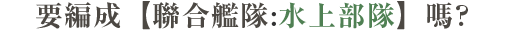
<style>
.page{position:relative;width:505px;height:31px;background:#ffffff}
.page>*{position:absolute;margin:0}
.t1{font:28px "RyuminPr6N-ExBold";letter-spacing:0.05em;color:#4c4843}
.t2{font:28px "RyuminPr6N-ExBold";letter-spacing:0.05em;color:#323232}
.t3{font:28px "RyuminPr6N-ExBold";letter-spacing:0.05em;color:#4f8053}
</style>
<div class="page">
<p class="t1" style="left:36px;top:1px;width:432px;height:29px">要編成【聯合艦隊<span class="t2">:</span><span class="t3">水上部隊</span>】嗎?</p>
</div>
